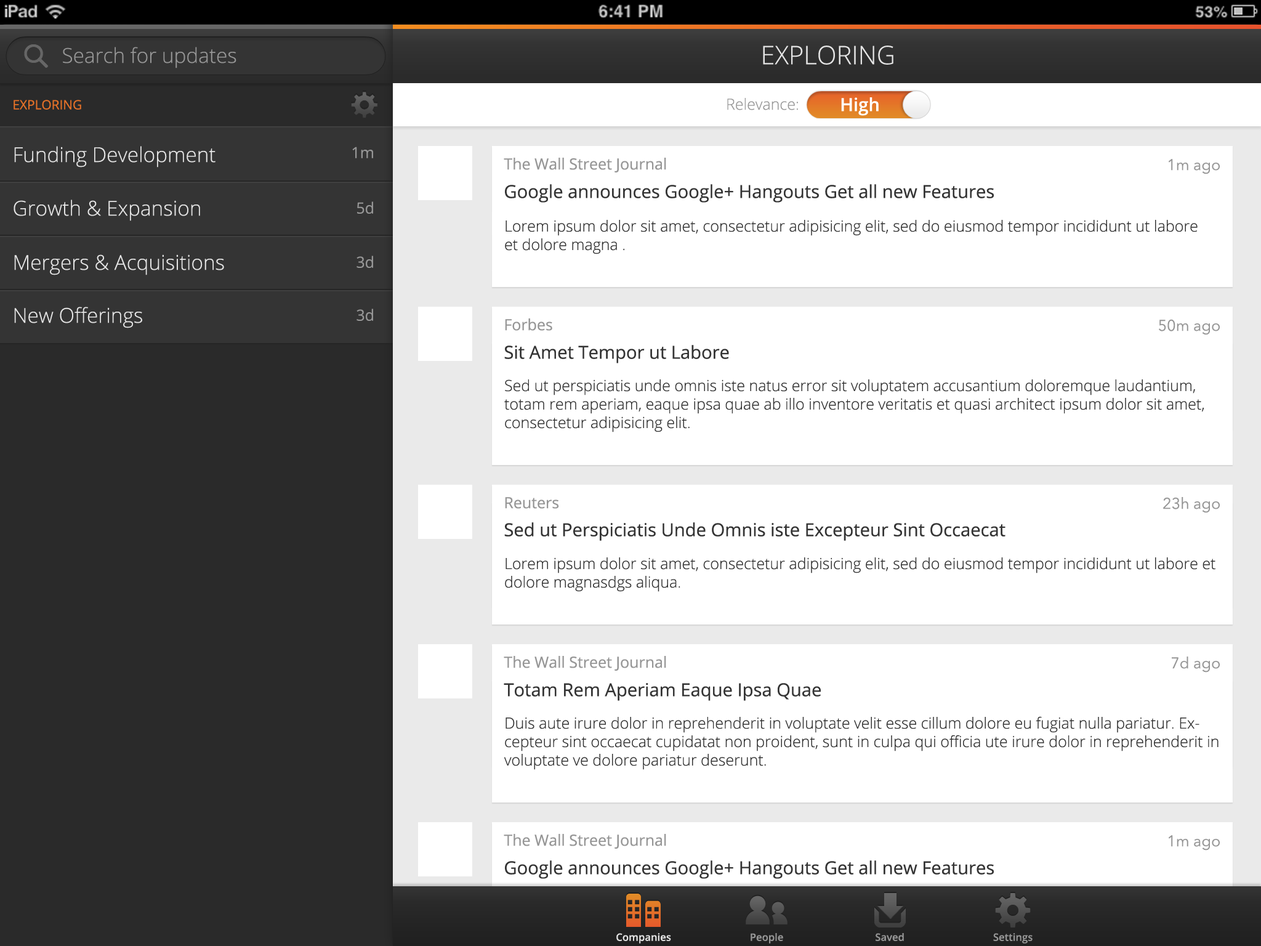
<style>
.page{position:relative;width:1261px;height:946px;background:#ffffff}
.page>*{position:absolute;margin:0}
.t1{font:20.5px "OpenSans-Light";color:#969696}
.t2{font:25.7px "OpenSans-Light";color:#e5e5e5}
.t3{font:12.8px "OpenSans";color:#e57128}
.t4{font:15.4px "OpenSans-Light";color:#969696}
.t5{font:18px "OpenSans-Semibold";color:#ffffff}
.t6{font:20.5px "OpenSans-Light";color:#e5e5e5}
.t7{font:15.4px "OpenSans";color:#969696}
.t8{font:18px "OpenSans";color:#343434}
.t9{font:15.4px "AvenirNext-Regular";color:#969696}
.t10{font:15.4px "OpenSans-Light";color:#343434}
.t11{font:10.3px "OpenSans-Semibold";color:#e5e5e5}
.t12{font:10.3px "OpenSans-Semibold";color:#969696}
</style>
<div class="page">
<p class="t1" style="left:63px;top:47px;width:173px;height:21px">Search for updates</p>
<p class="t2" style="left:763px;top:46px;width:130px;height:19px">EXPLORING</p>
<p class="t3" style="left:14px;top:100px;width:67px;height:10px">EXPLORING</p>
<p class="t4" style="left:727px;top:98px;width:71px;height:12px">Relevance:</p>
<p class="t5" style="left:841px;top:97px;width:38px;height:19px">High</p>
<p class="t6" style="left:14px;top:146px;width:201px;height:21px">Funding Development</p>
<p class="t7" style="left:352px;top:147px;width:21px;height:11px">1m</p>
<p class="t8" style="left:504px;top:158px;width:490px;height:45px"><span class="t7">The Wall Street Journal     <br></span>Google announces Google+ Hangouts Get all new Features</p>
<p class="t9" style="left:1168px;top:159px;width:52px;height:15px">1m ago</p>
<p class="t6" style="left:14px;top:199px;width:186px;height:22px">Growth &amp; Expansion</p>
<p class="t7" style="left:357px;top:201px;width:16px;height:13px">5d</p>
<p class="t10" style="left:505px;top:220px;width:693px;height:34px">Lorem ipsum dolor sit amet, consectetur adipisicing elit, sed do eiusmod tempor incididunt ut labore et dolore magna .</p>
<p class="t6" style="left:14px;top:254px;width:210px;height:21px">Mergers &amp; Acquisitions</p>
<p class="t7" style="left:356px;top:256px;width:17px;height:12px">3d</p>
<p class="t6" style="left:14px;top:307px;width:128px;height:21px">New Offerings</p>
<p class="t7" style="left:356px;top:308px;width:17px;height:13px">3d</p>
<p class="t8" style="left:504px;top:318px;width:225px;height:45px"><span class="t7">Forbes<br></span>Sit Amet Tempor ut Labore</p>
<p class="t9" style="left:1159px;top:319px;width:61px;height:16px">50m ago</p>
<p class="t10" style="left:504px;top:379px;width:700px;height:53px">Sed ut perspiciatis unde omnis iste natus error sit voluptatem accusantium doloremque laudantium, totam rem aperiam, eaque ipsa quae ab illo inventore veritatis et quasi architect ipsum dolor sit amet, consectetur adipisicing elit.</p>
<p class="t8" style="left:504px;top:497px;width:501px;height:44px"><span class="t7">Reuters<br></span>Sed ut Perspiciatis Unde Omnis iste Excepteur Sint Occaecat</p>
<p class="t9" style="left:1163px;top:497px;width:57px;height:16px">23h ago</p>
<p class="t10" style="left:505px;top:557px;width:710px;height:35px">Lorem ipsum dolor sit amet, consectetur adipisicing elit, sed do eiusmod tempor incididunt ut labore et dolore magnasdgs aliqua.</p>
<p class="t8" style="left:504px;top:656px;width:317px;height:45px"><span class="t7">The Wall Street Journal<br></span>Totam Rem Aperiam Eaque Ipsa Quae</p>
<p class="t9" style="left:1172px;top:656px;width:48px;height:16px">7d ago</p>
<p class="t10" style="left:504px;top:716px;width:714px;height:54px">Duis aute irure dolor in reprehenderit in voluptate velit esse cillum dolore eu fugiat nulla pariatur. Excepteur sint occaecat cupidatat non proident, sunt in culpa qui officia ute irure dolor in reprehenderit in voluptate ve dolore pariatur deserunt.</p>
<p class="t8" style="left:504px;top:834px;width:490px;height:45px"><span class="t7">The Wall Street Journal     <br></span>Google announces Google+ Hangouts Get all new Features</p>
<p class="t9" style="left:1168px;top:835px;width:52px;height:15px">1m ago</p>
<p class="t11" style="left:616px;top:933px;width:55px;height:10px">Companies</p>
<p class="t12" style="left:751px;top:933px;width:32px;height:10px">People</p>
<p class="t12" style="left:875px;top:933px;width:29px;height:8px">Saved</p>
<p class="t12" style="left:993px;top:933px;width:39px;height:10px">Settings</p>
</div>
